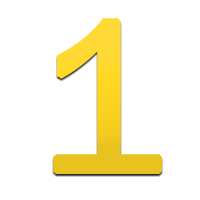
<style>
.page{position:relative;width:200px;height:200px;background:#ffffff}
.page>*{position:absolute;margin:0}
.t1{font:220px "FranklinGothic-Book";letter-spacing:-0.04em;color:#ffd622;text-transform:uppercase;font-weight:bold}
</style>
<div class="page">
<p class="t1" style="left:53px;top:18px;width:109px;height:156px">1</p>
</div>
